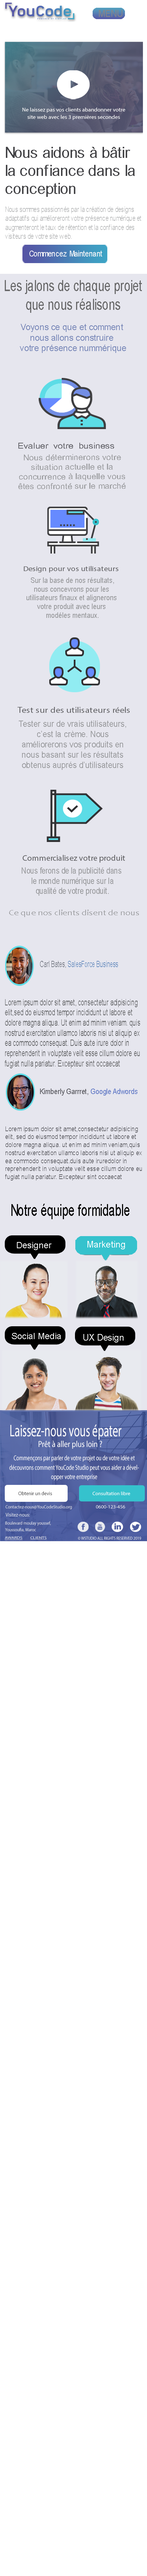
<style>
.page{position:relative;width:147px;height:2576px;background:#ffffff}
.page>*{position:absolute;margin:0}
.t1{font:5.5px/7.3px "MyriadPro-Regular";color:#ffffff;scale:1.05 1}
.t2{font:15px "ArialMT";color:#434346}
.t3{font:7.5px "ArialMT";color:#b9babb;scale:0.77 1}
.t4{font:8px "ArialMT";color:#f5f5f7;scale:0.91 1}
.t5{font:15.6px "ArialMT";color:#69696a;scale:0.71 1}
.t6{font:8.7px "ArialMT";color:#7988b8;scale:0.97 1}
.t7{font:8.1px "ArialMT";color:#636369;scale:1.12 1}
.t8{font:8px "ArialMT";color:#9d9ea1;scale:1.07 1}
.t9{font:7.1px "MyriadPro-Regular";color:#5f5f62;scale:1.14 1}
.t10{font:0px "MyriadPro-Regular";color:#5f5f62;scale:1.14 1}
.t11{font:7.3px "ArialMT";color:#9d9ea1;scale:0.92 1}
.t12{font:8.3px "MyriadPro-Regular";color:#5f5f62;scale:1.13 1}
.t13{font:0px "MyriadPro-Regular";color:#5f5f62;scale:1.13 1}
.t14{font:8.6px "ArialMT";color:#9d9ea1;scale:0.93 1}
.t15{font:8.2px "MyriadPro-Regular";color:#5f5f62}
.t16{font:0px "MyriadPro-Regular";color:#5f5f62}
.t17{font:8.4px "ArialMT";color:#9d9ea1;scale:0.84 1}
.t18{font:8px "Candara";color:#9d9ea1;scale:1.16 1}
.t19{font:8.5px "ArialMT";color:#6a8ebf;scale:0.64 1}
.t20{font:8.5px "ArialMT";color:#777b85;scale:0.64 1}
.t21{font:8.5px "ArialMT";color:#5d5e60;scale:0.7 1}
.t22{font:7.2px "ArialMT";color:#636369;scale:0.9 1}
.t23{font:7.2px "ArialMT";color:#6c82c9;scale:0.9 1}
.t24{font:6.7px "ArialMT";color:#636369;scale:0.9 1}
.t25{font:16.5px "ArialMT";color:#080808;scale:0.67 1}
.t26{font:9.1px "ArialMT";color:#ffffff}
.t27{font:8.8px "ArialMT";color:#ffffff}
.t28{font:9.1px "ArialMT";color:#ffffff;scale:0.96 1}
.t29{font:16.9px "MyriadPro-Regular";color:#ffffff;scale:0.64 1}
.t30{font:8.8px "MyriadPro-Regular";color:#ffffff;scale:0.83 1}
.t31{font:7px/9.4px "MyriadPro-Regular";color:#ffffff;scale:0.71 1}
.t32{font:5.2px "MyriadPro-Regular";color:#3d3d3f;scale:0.94 1}
.t33{font:4.9px "MyriadPro-Regular";color:#ffffff;scale:1.04 1}
.t34{font:4.7px "MyriadPro-Regular";color:#e8eaef;scale:0.92 1}
.t35{font:4.9px "MyriadPro-Regular";color:#e8eaef;scale:1.04 1}
.t36{font:5.2px "MyriadPro-Regular";color:#e8eaef;scale:0.9 1}
.t37{font:4.6px/6.9px "MyriadPro-Regular";color:#e8eaef;scale:0.9 1}
.t38{font:3.7px "MyriadPro-Regular";color:#e8eaef;text-decoration:underline;scale:1.3 1}
.t39{font:3.6px "MyriadPro-Regular";color:#e8eaef;text-decoration:underline;scale:1.34 1}
.t40{font:4.4px "MyriadPro-Regular";color:#e8eaef;scale:0.86 1}
</style>
<div class="page">
<p class="t1" style="left:22px;top:107px;width:103px;height:13px;text-align:center">Ne laissez pas vos clients abandonner votre<br>site web avec les 3 premières secondes</p>
<p class="t2" style="left:6px;top:147px;width:129px;height:50px">Nous aidons à bâtir <br>la confiance dans la <br>conception</p>
<p class="t3" style="left:5px;top:206px;width:136px;height:33px">Nous sommes passionnés par la création de designs<br>adaptatifs qui amélioreront votre présence numérique et<br>augmenteront le taux de rétention et la confiance des <br>visiteurs de votre site web.</p>
<p class="t4" style="left:29px;top:251px;width:73px;height:5px">Commencez Maintenant</p>
<p class="t5" style="left:5px;top:280px;width:137px;height:33px;text-align:center">Les jalons de chaque projet<br> que nous réalisons</p>
<p class="t6" style="left:20px;top:324px;width:106px;height:29px;text-align:center">Voyons ce que et comment <br>nous allons construire <br>votre présence nummérique</p>
<p class="t7" style="left:18px;top:443px;width:96px;height:6px">Evaluer  votre  business</p>
<p class="t8" style="left:18px;top:454px;width:108px;height:35px;text-align:center">Nous déterminerons votre<br>situation actuelle et la<br>concurrence à laquelle vous<br>êtes confronté sur le marché</p>
<p class="t9" style="left:23px;top:565px;width:96px;height:8px"><span class="t10">C</span>Design pour vos utilisateurs</p>
<p class="t11" style="left:26px;top:577px;width:91px;height:41px;text-align:center">Sur la base de nos résultats,<br>nous concevrons pour les <br>utilisateurs finaux et alignerons <br>votre produit avec leurs <br>modéles mentaux.</p>
<p class="t12" style="left:17px;top:706px;width:113px;height:9px"><span class="t13">C</span>Test sur des utilisateurs réels</p>
<p class="t14" style="left:19px;top:721px;width:107px;height:49px;text-align:center">Tester sur de vrais utilisateurs,<br>c’est la crème. Nous<br>améliorerons vos produits en<br>nous basant sur les résultats<br>obtenus auprés d’utilisateurs</p>
<p class="t15" style="left:22px;top:854px;width:103px;height:9px"><span class="t16">C</span>Commercialisez votre produit</p>
<p class="t17" style="left:22px;top:867px;width:99px;height:29px;text-align:center">Nous ferons de la publicité dans <br>le monde numérique sur la<br>qualité de votre produit.</p>
<p class="t18" style="left:9px;top:910px;width:130px;height:7px">Ce que nos clients disent de nous</p>
<p class="t19" style="left:40px;top:961px;width:78px;height:7px"><span class="t20">Carl Bates, </span>SalesForce Business</p>
<p class="t21" style="left:5px;top:999px;width:135px;height:69px">Lorem ipsum dolor sit amet, consectetur adipisicing<br>elit,sed do eiusmod tempor incididunt ut labore et<br>dolore magna aliqua. Ut enim ad minim veniam. quis<br>nostrud exercitation ullamco laboris nisi ut aliquip ex<br>ea commodo consequat. Duis aute irure dolor in<br>reprehenderit in voluptate velit esse cillum dolore eu <br>fugiat nulla pariatur. Excepteur sint occaecat</p>
<p class="t22" style="left:40px;top:1089px;width:98px;height:7px">Kimberly Garrret, <span class="t23">Google Adwords</span></p>
<p class="t24" style="left:5px;top:1126px;width:137px;height:55px">Lorem ipsum dolor sit amet,consectetur adipisicing<br>elit, sed do eiusmod tempor incididunt ut labore et<br>dolore magna aliqua. ut enim ad minim veniam,quis <br>nostrud exercitation ullamco laboris nisi ut aliquip ex<br>ea commodo consequat.duis aute iruredolor in<br>reprehenderit in voluptate velit esse cillum dolore eu<br>fugiat nulla pariatur. Excepteur sint occaecat</p>
<p class="t25" style="left:11px;top:1204px;width:119px;height:15px">Notre équipe formidable</p>
<p class="t26" style="left:88px;top:1241px;width:37px;height:8px">Marketing</p>
<p class="t27" style="left:17px;top:1242px;width:35px;height:8px">Designer</p>
<p class="t27" style="left:12px;top:1333px;width:49px;height:6px">Social Media</p>
<p class="t28" style="left:84px;top:1334px;width:40px;height:8px">UX Design</p>
<p class="t29" style="left:10px;top:1425px;width:112px;height:15px">Laissez-nous vous épater</p>
<p class="t30" style="left:39px;top:1441px;width:63px;height:8px">Prêt à aller plus loin ?</p>
<p class="t31" style="left:9px;top:1455px;width:130px;height:25px;text-align:center">Commençons par parler de votre projet ou de votre idée et découvrons comment YouCode Studio peut vous aider a développer votre entreprise</p>
<p class="t32" style="left:18px;top:1491px;width:34px;height:4px">Obtenir un devis</p>
<p class="t33" style="left:93px;top:1492px;width:37px;height:3px">Consultation libre</p>
<p class="t34" style="left:6px;top:1505px;width:66px;height:5px">Contactez-nous@YouCodeStudio.org</p>
<p class="t35" style="left:96px;top:1505px;width:29px;height:3px">0600-123-456</p>
<p class="t36" style="left:6px;top:1513px;width:24px;height:4px">Visitez-nous:</p>
<p class="t37" style="left:5px;top:1521px;width:46px;height:11px">Boulevard moulay youssef,<br>Youssoufia, Maroc</p>
<p class="t38" style="left:5px;top:1536px;width:18px;height:4px">AWARDS</p>
<p class="t39" style="left:30px;top:1536px;width:17px;height:4px">CLIENTS</p>
<p class="t40" style="left:78px;top:1536px;width:63px;height:4px">© WSTUDIO ALL RIGHTS RESERVED 2019</p>
</div>
